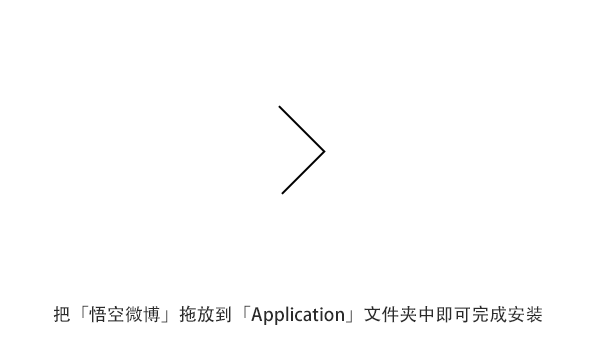
<style>
.page{position:relative;width:600px;height:360px;background:#ffffff}
.page>*{position:absolute;margin:0}
.t1{font:18px "AdobeHeitiStd-Regular";color:#2b2b2b}
</style>
<div class="page">
<p class="t1" style="left:53px;top:305px;width:489px;height:20px">把「悟空微博」拖放到「Application」文件夹中即可完成安装</p>
</div>
